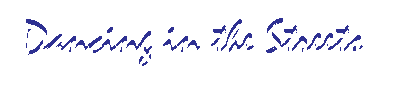
<style>
.page{position:relative;width:400px;height:100px;background:#ffffff}
.page>*{position:absolute;margin:0}
.t1{font:48px "Mistral";color:#2e3092}
</style>
<div class="page">
<p class="t1" style="left:26px;top:18px;width:337px;height:48px">Dancing in the Streets</p>
</div>
